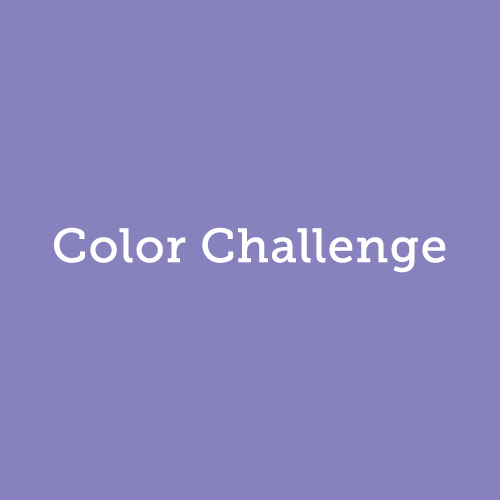
<style>
.page{position:relative;width:500px;height:500px;background:#8781bd}
.page>*{position:absolute;margin:0}
.t1{font:47.6px "MuseoSlab-500";color:#ffffff;font-weight:bold}
</style>
<div class="page">
<p class="t1" style="left:54px;top:227px;width:392px;height:46px">Color Challenge</p>
</div>
